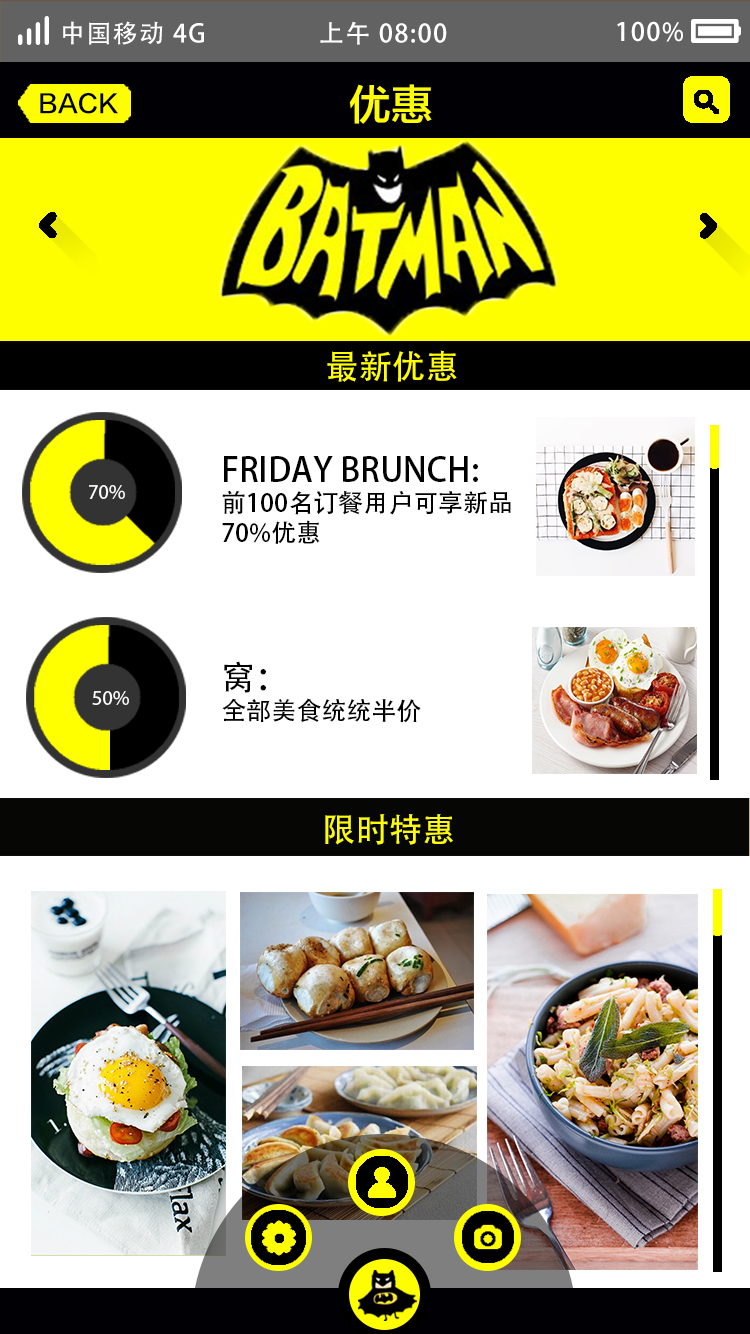
<style>
.page{position:relative;width:750px;height:1334px;background:#ffffff}
.page>*{position:absolute;margin:0}
.t1{font:25px "AdobeHeitiStd-Regular";letter-spacing:0.06em;color:#ffffff}
.t2{font:41.7px "FZLTZHK--GBK1-0";color:#fefe01;text-transform:uppercase}
.t3{font:25px "FZLTZHK--GBK1-0";color:#000000;text-transform:uppercase}
.t4{font:33.3px "AdobeHeitiStd-Regular";color:#fffe00}
.t5{font:25px "AdobeHeitiStd-Regular";color:#000000;text-transform:uppercase}
.t6{font:33.3px "AdobeHeitiStd-Regular";color:#000000;text-transform:uppercase}
.t7{font:20.8px "MyriadPro-Regular";color:#ffffff;text-transform:uppercase}
.t8{font:33.3px "AdobeHeitiStd-Regular";color:#fdfd08}
</style>
<div class="page">
<p class="t1" style="left:63px;top:21px;width:141px;height:24px">中国移动 4G</p>
<p class="t1" style="left:320px;top:21px;width:127px;height:24px">上午 08:00</p>
<p class="t1" style="left:617px;top:21px;width:66px;height:21px">100%</p>
<p class="t2" style="left:349px;top:84px;width:83px;height:40px">优惠</p>
<p class="t3" style="left:40px;top:92px;width:78px;height:22px">back</p>
<p class="t4" style="left:327px;top:350px;width:130px;height:32px">最新优惠</p>
<p class="t5" style="left:222px;top:456px;width:289px;height:88px"><span class="t6">friday brunch:<br></span>前100名订餐用户可享新品70%优惠</p>
<p class="t7" style="left:89px;top:485px;width:36px;height:14px">70%</p>
<p class="t5" style="left:222px;top:661px;width:199px;height:62px"><span class="t6">窝：<br></span>全部美食统统半价</p>
<p class="t7" style="left:92px;top:691px;width:37px;height:14px">50%</p>
<p class="t8" style="left:325px;top:814px;width:128px;height:31px">限时特惠</p>
</div>
